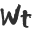
<style>
.page{position:relative;width:32px;height:32px;background:#ffffff}
.page>*{position:absolute;margin:0}
.t1{font:34px "Chiller-Regular";color:#303030;font-weight:bold}
</style>
<div class="page">
<p class="t1" style="left:0px;top:4px;width:32px;height:24px">Wt</p>
</div>
